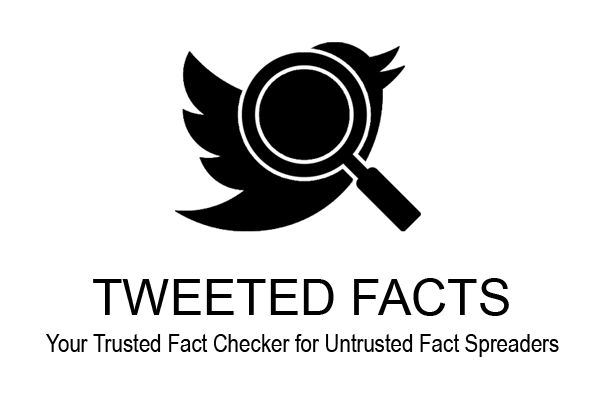
<style>
.page{position:relative;width:600px;height:400px;background:#ffffff}
.page>*{position:absolute;margin:0}
.t1{font:50px "ArialMT";color:#000000}
.t2{font:25px "ArialNarrow";color:#000000}
</style>
<div class="page">
<p class="t1" style="left:93px;top:278px;width:416px;height:38px">TWEETED FACTS</p>
<p class="t2" style="left:46px;top:334px;width:513px;height:23px">Your Trusted Fact Checker for Untrusted Fact Spreaders</p>
</div>
